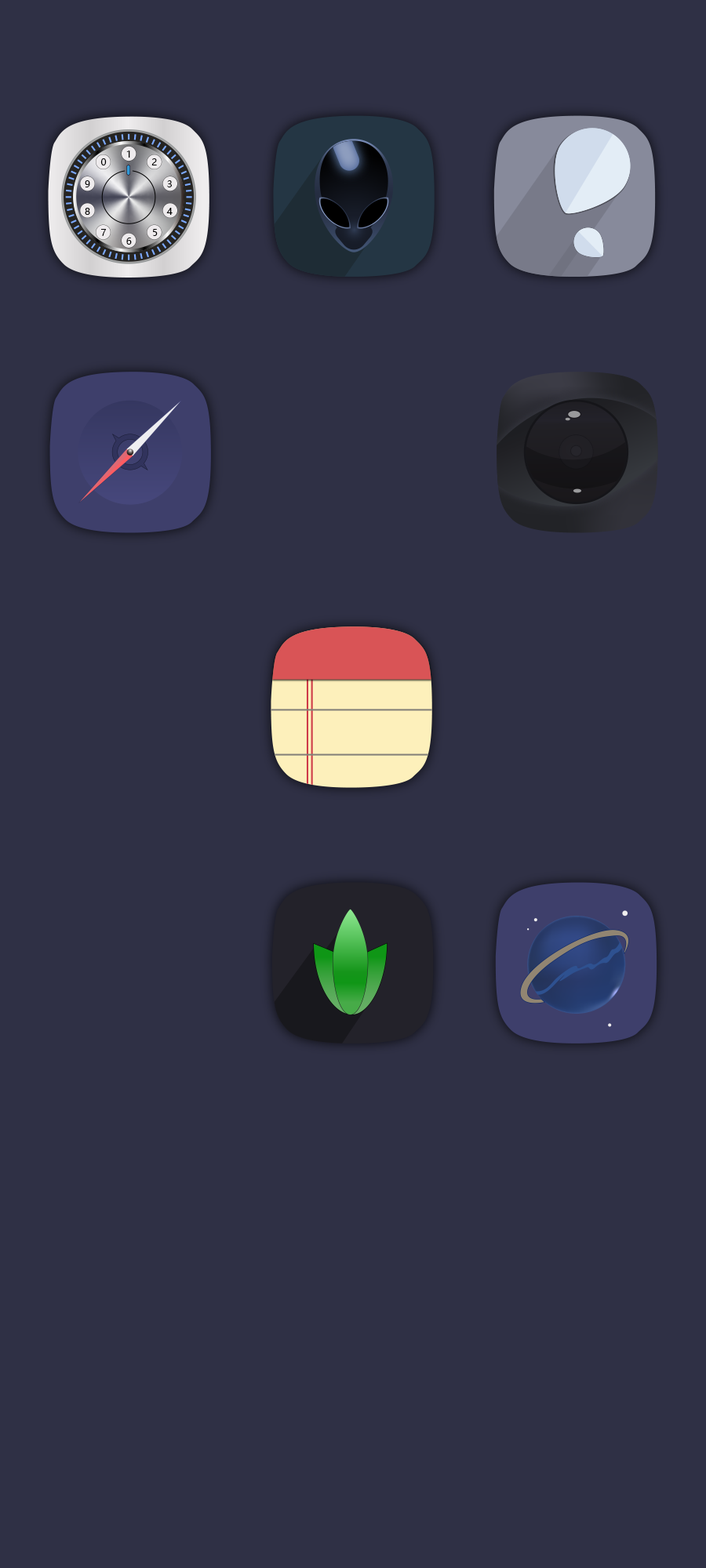
<style>
.page{position:relative;width:706px;height:1568px;background:#2f3045}
.page>*{position:absolute;margin:0}
.t1{font:9.4px "MicrosoftYaHeiUI";color:#000000}
</style>
<div class="page">
<p class="t1" style="left:100px;top:158px;width:7px;height:7px">0</p>
<p class="t1" style="left:126px;top:151px;width:4px;height:7px">1</p>
<p class="t1" style="left:151px;top:158px;width:6px;height:7px">2</p>
<p class="t1" style="left:85px;top:180px;width:5px;height:7px">9</p>
<p class="t1" style="left:167px;top:180px;width:5px;height:7px">3</p>
<p class="t1" style="left:85px;top:208px;width:5px;height:7px">8</p>
<p class="t1" style="left:166px;top:208px;width:6px;height:7px">4</p>
<p class="t1" style="left:101px;top:229px;width:5px;height:7px">7</p>
<p class="t1" style="left:152px;top:229px;width:6px;height:7px">5</p>
<p class="t1" style="left:126px;top:238px;width:6px;height:7px">6</p>
</div>
